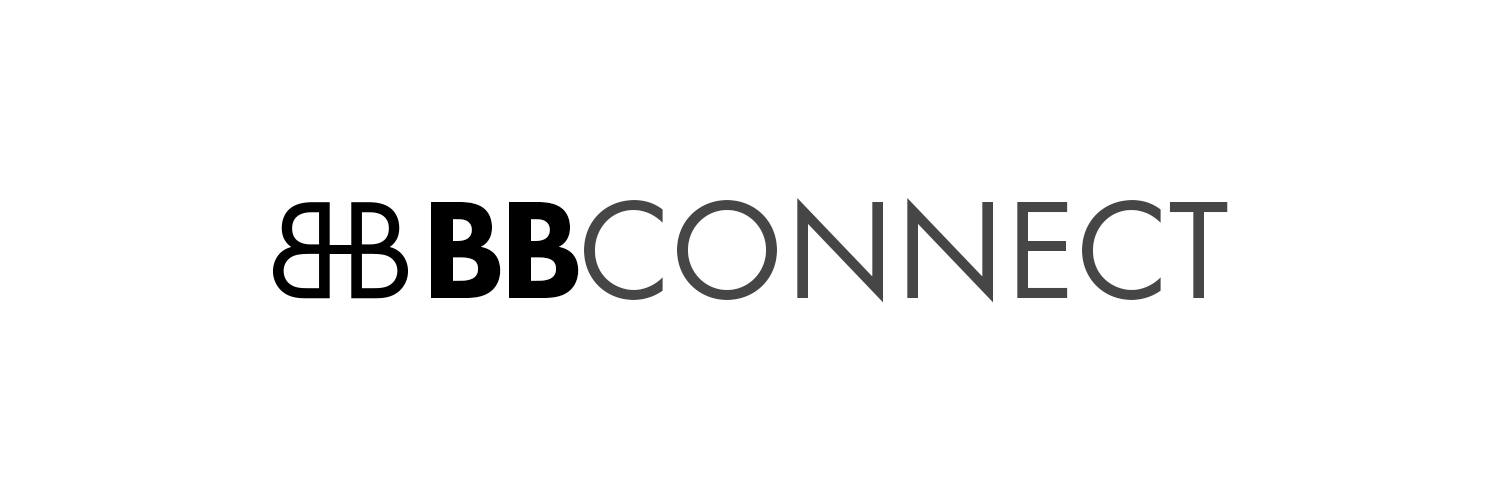
<style>
.page{position:relative;width:1500px;height:500px;background:#ffffff}
.page>*{position:absolute;margin:0}
.t1{font:144px "FuturaPT-Book";color:#464646;text-transform:uppercase}
.t2{font:144px "FuturaPT-Heavy";letter-spacing:-0.05em;color:#000000;text-transform:uppercase}
</style>
<div class="page">
<p class="t1" style="left:431px;top:197px;width:797px;height:106px"><span class="t2">BB</span>Connect</p>
</div>
